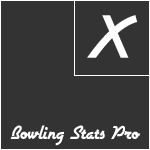
<style>
.page{position:relative;width:150px;height:150px;background:#333333}
.page>*{position:absolute;margin:0}
.t1{font:72px "Airstream";color:#ffffff}
.t2{font:22px "Airstream";color:#ffffff}
</style>
<div class="page">
<p class="t1" style="left:87px;top:15px;width:51px;height:43px">X</p>
<p class="t2" style="left:10px;top:125px;width:131px;height:21px">Bowling Stats Pro</p>
</div>
